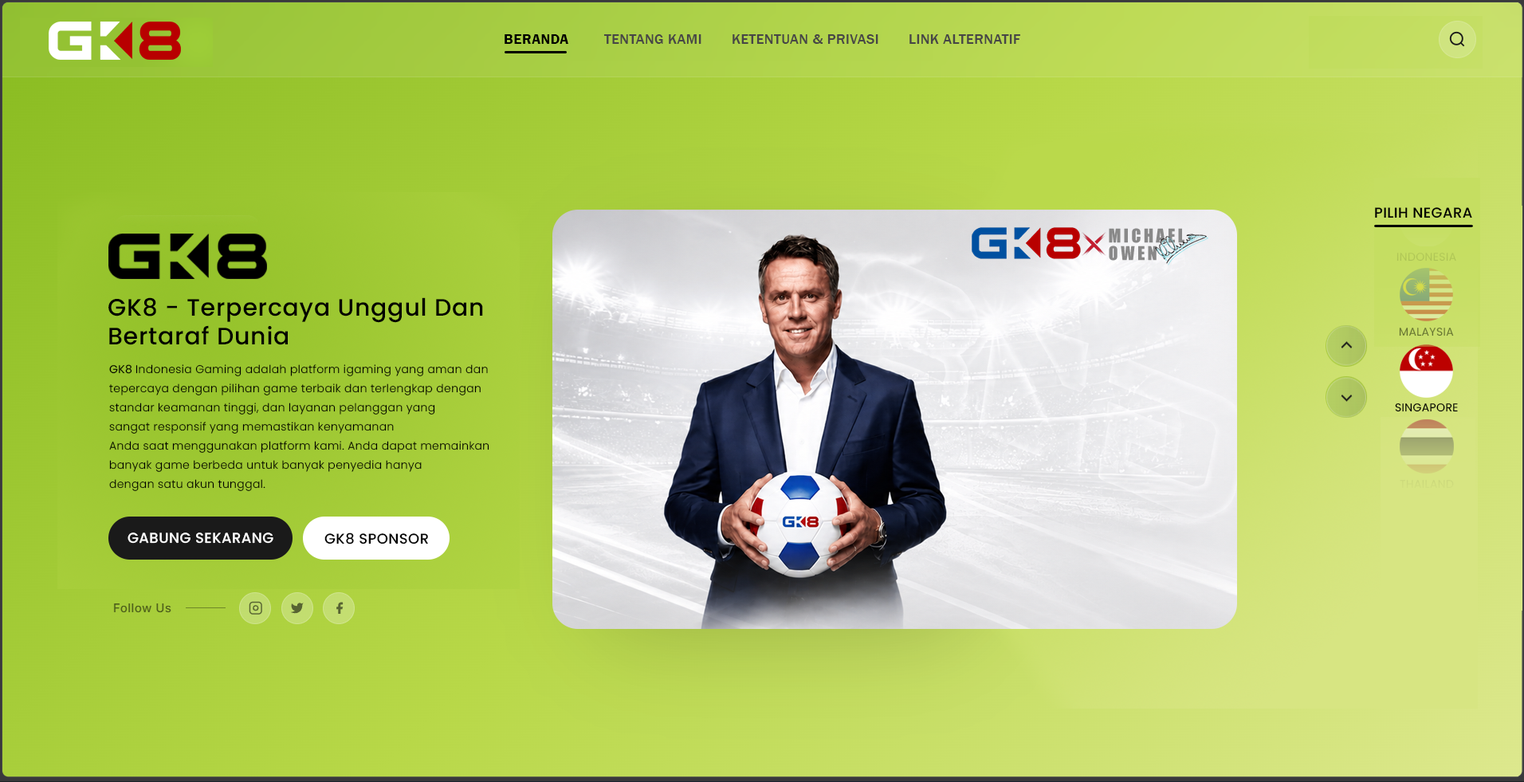
<style>
.page{position:relative;width:1524px;height:782px}
.page>*{position:absolute;margin:0}
.t1{font:14.4px "FranklinGothic-Demi";letter-spacing:0.025em;color:#000000}
.t2{font:14.4px "FranklinGothic-Medium";letter-spacing:0.025em;color:#474646}
.t3{font:14.4px "Poppins-Medium";letter-spacing:0.025em;color:#000000}
.t4{font:11.2px "Poppins-Regular";letter-spacing:0.025em;color:#afc656}
.t5{font:23.9px/28.7px "Poppins-Medium";letter-spacing:0.025em;color:#000000}
.t6{font:11.2px "Poppins-Regular";letter-spacing:0.025em;color:#647131}
.t7{font:11.2px/19.1px "Poppins-Light";letter-spacing:0.025em;color:#000000}
.t8{font:11.2px/19.1px "Poppins-Regular";letter-spacing:0.025em;color:#000000}
.t9{font:11.2px "Poppins-Regular";letter-spacing:0.025em;color:#000000}
.t10{font:11.2px "Poppins-Regular";letter-spacing:0.025em;color:#cedb7c}
.t11{font:14.4px "Poppins-Medium";letter-spacing:0.025em;color:#ffffff}
</style>
<div class="page">
<p class="t1" style="left:505px;top:34px;width:63px;height:10px">BERANDA</p>
<p class="t2" style="left:604px;top:34px;width:98px;height:10px">TENTANG KAMI</p>
<p class="t2" style="left:733px;top:34px;width:146px;height:10px">KETENTUAN &amp; PRIVASI</p>
<p class="t2" style="left:910px;top:34px;width:111px;height:10px">LINK ALTERNATIF</p>
<p class="t3" style="left:1375px;top:207px;width:98px;height:11px">PILIH NEGARA</p>
<p class="t4" style="left:1397px;top:252px;width:60px;height:10px">INDONESIA</p>
<p class="t5" style="left:108px;top:297px;width:375px;height:48px">GK8 - Terpercaya Unggul Dan<br>Bertaraf Dunia</p>
<p class="t6" style="left:1399px;top:327px;width:55px;height:9px">MALAYSIA</p>
<p class="t7" style="left:109px;top:364px;width:381px;height:127px"><span class="t8">GK8 </span>Indonesia Gaming adalah platform igaming yang aman dan<br>tepercaya dengan pilihan game terbaik dan terlengkap dengan<br>standar keamanan tinggi, dan layanan pelanggan yang<br>sangat responsif yang memastikan kenyamanan <br>Anda saat menggunakan platform kami. Anda dapat memainkan<br>banyak game berbeda untuk banyak penyedia hanya<br>dengan satu akun tunggal.</p>
<p class="t9" style="left:1395px;top:403px;width:63px;height:9px">SINGAPORE</p>
<p class="t10" style="left:1400px;top:480px;width:54px;height:9px">THAILAND</p>
<p class="t11" style="left:128px;top:533px;width:145px;height:11px">GABUNG SEKARANG</p>
<p class="t3" style="left:325px;top:533px;width:103px;height:12px">GK8 SPONSOR</p>
</div>
